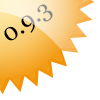
<style>
.page{position:relative;width:100px;height:100px;background:#ffffff}
.page>*{position:absolute;margin:0}
.t1{font:24px "Georgia"}
</style>
<div class="page">
<p class="t1" style="left:4px;top:4px;width:49px;height:37px;rotate:-35deg">0.9.3</p>
</div>
